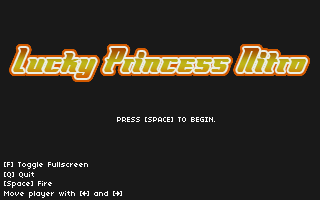
<style>
.page{position:relative;width:320px;height:200px;background:#191919}
.page>*{position:absolute;margin:0}
.t1{font:8px "04b03";color:#ffffff}
</style>
<div class="page">
<p class="t1" style="left:117px;top:117px;width:98px;height:5px">PRESS [SPACE] TO BEGIN.</p>
<p class="t1" style="left:4px;top:162px;width:118px;height:36px">[F] Toggle Fullscreen<br>[Q] Quit<br>[Space] Fire<br>Move player with [ ] and [ ]</p>
</div>
